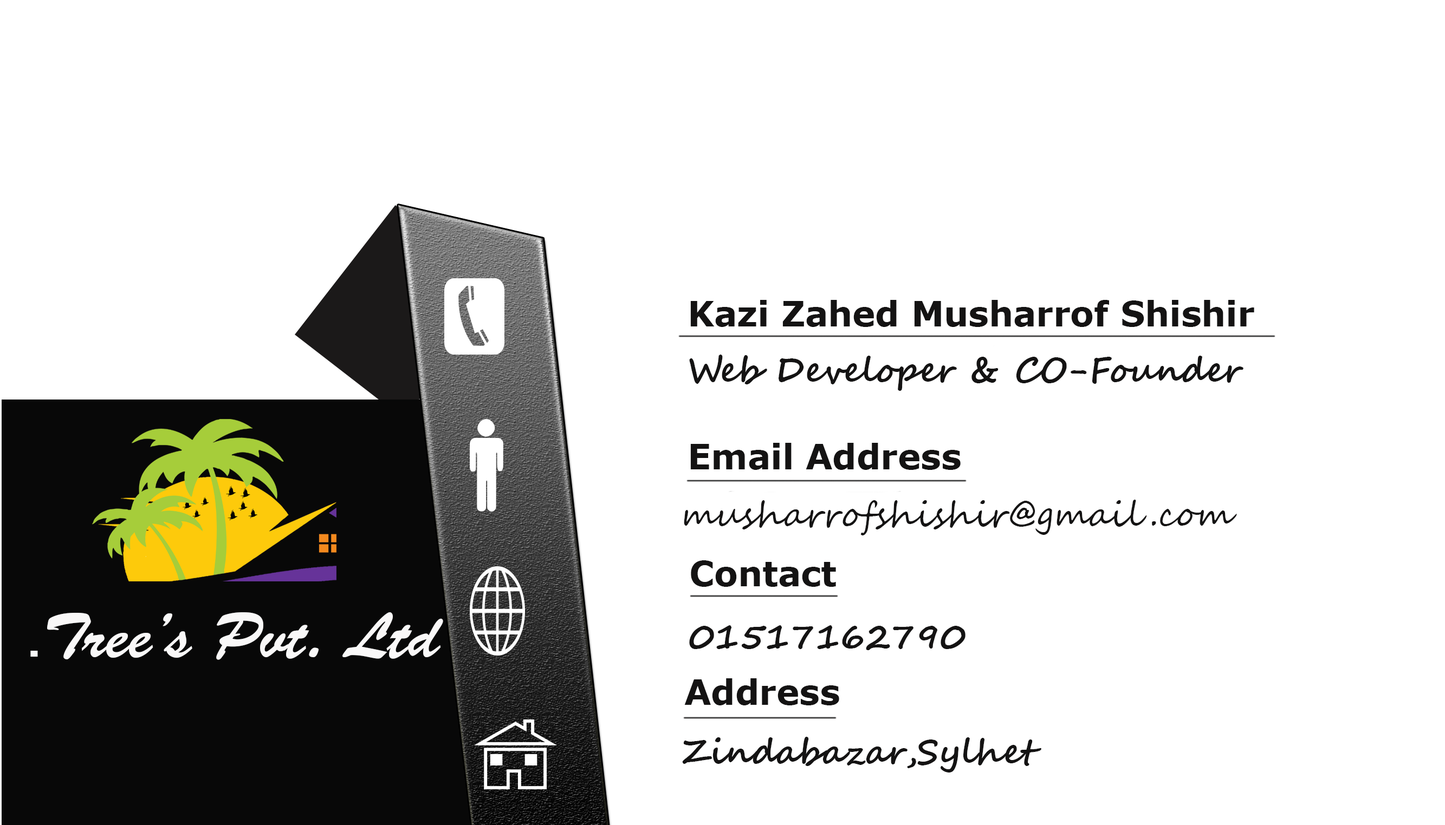
<style>
.page{position:relative;width:1445px;height:825px;background:#ffffff}
.page>*{position:absolute;margin:0}
.t1{font:34.4px "Verdana-Bold";color:#141313}
.t2{font:34.4px "SegoeScript-Bold";color:#141313}
.t3{font:34.4px "SegoeScript";color:#141313}
.t4{font:63.1px "BrushScriptStd";color:#f9f8f8}
.t5{font:6.5px "ArialMT";color:#f9f8f8}
</style>
<div class="page">
<p class="t1" style="left:690px;top:300px;width:564px;height:27px">Kazi Zahed Musharrof Shishir</p>
<p class="t2" style="left:689px;top:355px;width:554px;height:36px">Web Developer &amp; CO-Founder</p>
<p class="t1" style="left:690px;top:443px;width:270px;height:27px">Email Address</p>
<p class="t3" style="left:684px;top:500px;width:553px;height:36px">musharrofshishir@gmail.com</p>
<p class="t1" style="left:691px;top:561px;width:145px;height:26px">Contact</p>
<p class="t4" style="left:30px;top:613px;width:413px;height:47px">Tree’s Pvt. Ltd<span class="t5">.</span></p>
<p class="t2" style="left:689px;top:626px;width:276px;height:25px">01517162790</p>
<p class="t1" style="left:684px;top:679px;width:155px;height:27px">Address</p>
<p class="t2" style="left:682px;top:737px;width:359px;height:36px">Zindabazar,Sylhet</p>
</div>
